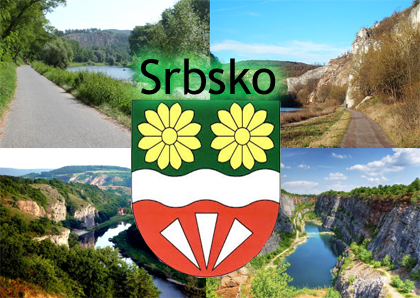
<style>
.page{position:relative;width:420px;height:298px}
.page>*{position:absolute;margin:0}
.t1{font:48px "TrebuchetMS";color:#000000}
</style>
<div class="page">
<p class="t1" style="left:141px;top:58px;width:135px;height:37px">Srbsko</p>
</div>
